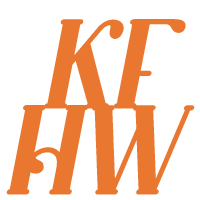
<style>
.page{position:relative;width:200px;height:200px;background:#ffffff}
.page>*{position:absolute;margin:0}
.t1{font:59.8px "KingLounpera-Solid";color:#e97730;font-style:italic}
</style>
<div class="page">
<p class="t1" style="left:44px;top:19px;width:142px;height:90px">KF</p>
<p class="t1" style="left:6px;top:105px;width:189px;height:90px">HW</p>
</div>
